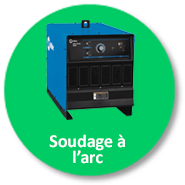
<style>
.page{position:relative;width:185px;height:185px;background:#00cc66}
.page>*{position:absolute;margin:0}
.t1{font:18px/16px "Calibri-Bold";color:#ffffff}
</style>
<div class="page">
<p class="t1" style="left:49px;top:134px;width:76px;height:30px;text-align:center">Soudage à <br>l’arc</p>
</div>
